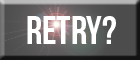
<style>
.page{position:relative;width:140px;height:60px}
.page>*{position:absolute;margin:0}
.t1{font:40px "BebasNeue";color:#ffffff}
</style>
<div class="page">
<p class="t1" style="left:27px;top:16px;width:89px;height:28px">RETRY?</p>
</div>
